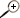
<style>
.page{position:relative;width:20px;height:18px;background:#ffffff}
.page>*{position:absolute;margin:0}
.t1{font:11px "Arial-BoldMT";color:#000000}
</style>
<div class="page">
<p class="t1" style="left:11px;top:4px;width:5px;height:5px">+</p>
</div>
